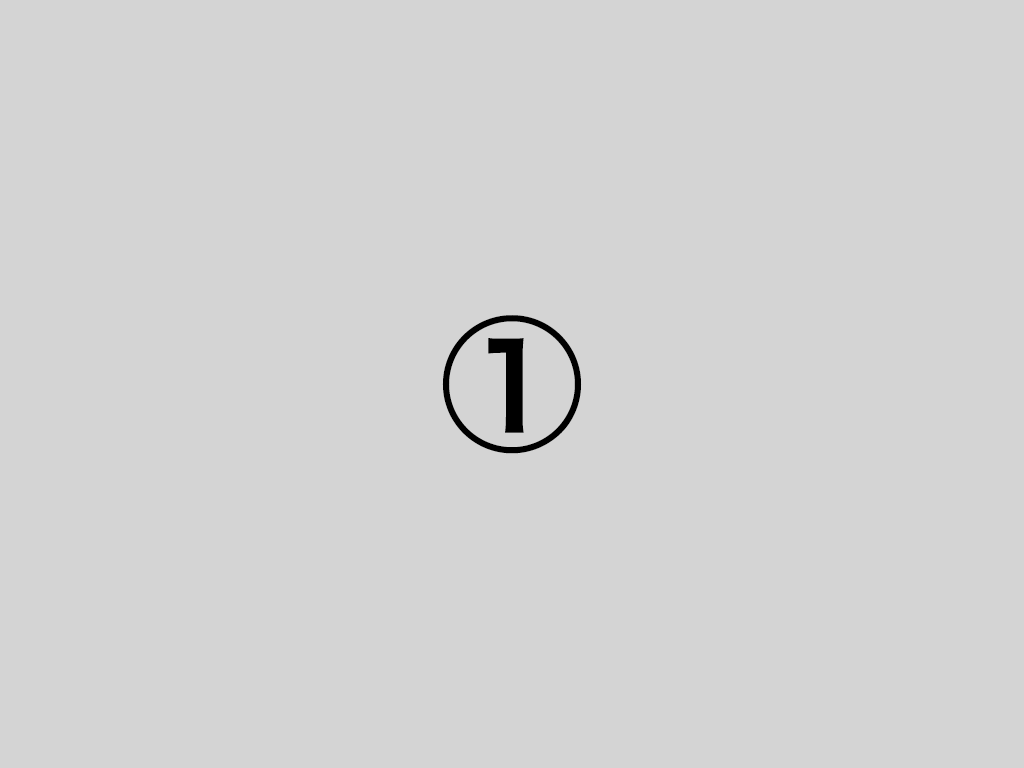
<style>
.page{position:relative;width:1024px;height:768px;background:#d4d4d4}
.page>*{position:absolute;margin:0}
.t1{font:247px "HiraKakuProN-W6";letter-spacing:-0.02em;color:#000000}
</style>
<div class="page">
<p class="t1" style="left:442px;top:315px;width:140px;height:139px">①</p>
</div>
